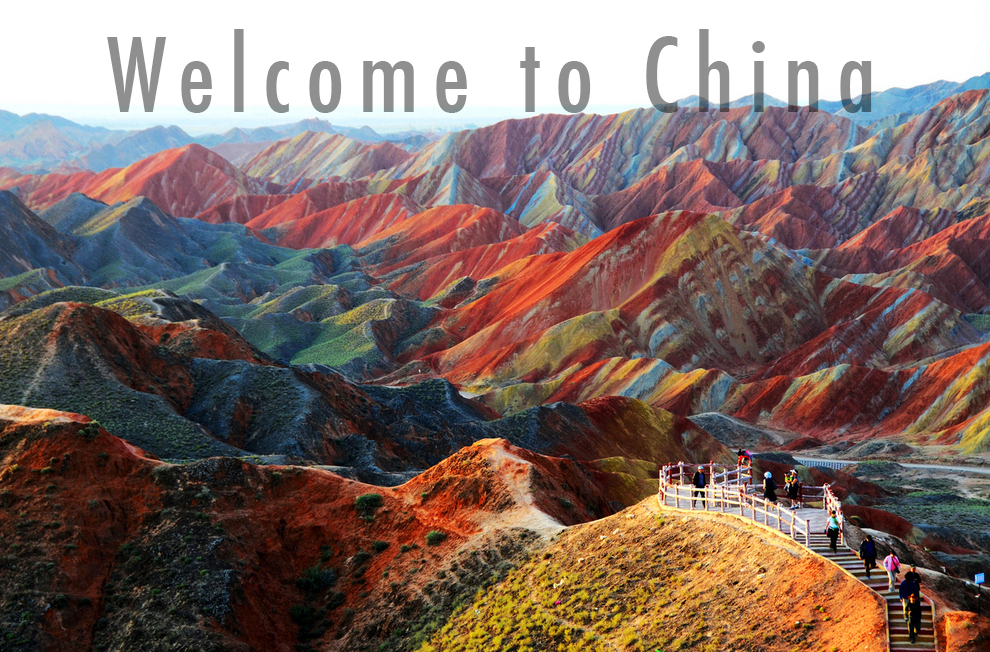
<style>
.page{position:relative;width:990px;height:652px}
.page>*{position:absolute;margin:0}
.t1{font:100px "Futura-CondensedMedium";letter-spacing:0.14em;color:#8f8f8f}
</style>
<div class="page">
<p class="t1" style="left:107px;top:29px;width:765px;height:84px">Welcome to China</p>
</div>
